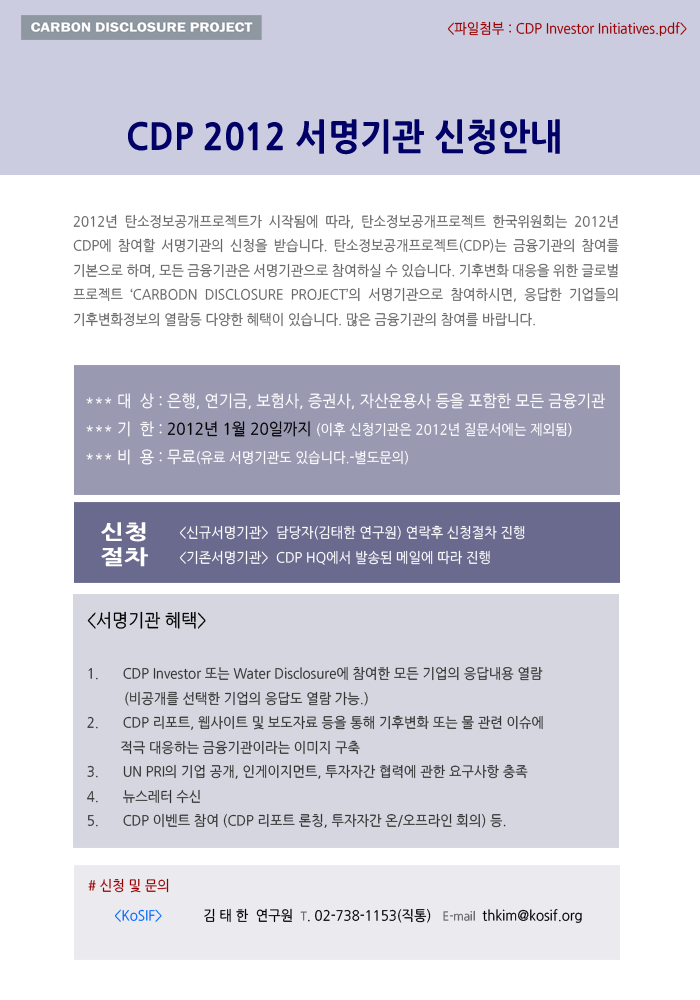
<style>
.page{position:relative;width:700px;height:1000px;background:#ffffff}
.page>*{position:absolute;margin:0}
.t1{font:14px "NanumGothic";color:#990000;scale:0.95 1}
.t2{font:36px "NanumGothicExtraBold";color:#000066;scale:0.95 1}
.t3{font:14px "NanumGothic";color:#666666;scale:0.95 1}
.t4{font:16px "NanumGothic";color:#ffffff;scale:0.95 1}
.t5{font:16px "NanumGothic";color:#000000;scale:0.95 1}
.t6{font:14px "NanumGothic";color:#ffffff;scale:0.95 1}
.t7{font:19.6px/25.2px "NanumGothicExtraBold";color:#ffffff;scale:1.31 1}
.t8{font:14px "NanumGothic";color:#333333;scale:0.95 1}
.t9{font:18px "NanumGothic";color:#000000;scale:0.95 1}
.t10{font:14px "NanumGothic";color:#000000;scale:0.95 1}
.t11{font:14px "NanumGothic";color:#0066ff;scale:0.95 1}
.t12{font:12px "NanumGothic";color:#666666;scale:0.95 1}
</style>
<div class="page">
<p class="t1" style="left:447px;top:21px;width:240px;height:15px">&lt;파일첨부 : CDP Investor Initiatives.pdf&gt;</p>
<p class="t2" style="left:128px;top:119px;width:432px;height:36px">CDP 2012 서명기관 신청안내</p>
<p class="t3" style="left:73px;top:214px;width:546px;height:113px;text-align:justify">2012년 탄소정보공개프로젝트가 시작됨에 따라, 탄소정보공개프로젝트 한국위원회는 2012년 CDP에 참여할 서명기관의 신청을 받습니다. 탄소정보공개프로젝트(CDP)는 금융기관의 참여를 기본으로 하며, 모든 금융기관은 서명기관으로 참여하실 수 있습니다. 기후변화 대응을 위한 글로벌 프로젝트 ‘CARBODN DISCLOSURE PROJECT’의 서명기관으로 참여하시면, 응답한 기업들의 기후변화정보의 열람등 다양한 혜택이 있습니다. 많은 금융기관의 참여를 바랍니다.</p>
<p class="t4" style="left:86px;top:393px;width:520px;height:72px;text-align:justify">*** 대  상 : 은행, 연기금, 보험사, 증권사, 자산운용사 등을 포함한 모든 금융기관<br>*** 기  한 : <span class="t5">2012년 1월 20일까지 </span><span class="t6">(이후 신청기관은 2012년 질문서에는 제외됨)<br></span>*** 비  용 : 무료<span class="t6">(유료 서명기관도 있습니다.-별도문의)</span></p>
<p class="t7" style="left:101px;top:522px;width:47px;height:45px;text-align:justify">신청<br>절차</p>
<p class="t6" style="left:179px;top:525px;width:346px;height:40px;text-align:justify">&lt;신규서명기관&gt;  담당자(김태한 연구원) 연락후 신청절차 진행<br>&lt;기존서명기관&gt;  CDP HQ에서 발송된 메일에 따라 진행</p>
<p class="t8" style="left:87px;top:611px;width:456px;height:217px;text-align:justify"><span class="t9">&lt;서명기관 혜택&gt;<br></span><br>1. CDP Investor 또는 Water Disclosure에 참여한 모든 기업의 응답내용 열람<br>          (비공개를 선택한 기업의 응답도 열람 가능.)<br>2. CDP 리포트, 웹사이트 및 보도자료 등을 통해 기후변화 또는 물 관련 이슈에 <br>         적극 대응하는 금융기관이라는 이미지 구축<br>3. UN PRI의 기업 공개, 인게이지먼트, 투자자간 협력에 관한 요구사항 충족<br>4. 뉴스레터 수신<br>5. CDP 이벤트 참여 (CDP 리포트 론칭, 투자자간 온/오프라인 회의) 등.</p>
<p class="t1" style="left:88px;top:878px;width:81px;height:15px"># 신청 및 문의</p>
<p class="t10" style="left:114px;top:908px;width:468px;height:15px"><span class="t11">&lt;KoSIF&gt;</span>           김 태 한  연구원  <span class="t12">T</span>. 02-738-1153(직통)   <span class="t12">E-mail </span> thkim@kosif.org</p>
</div>
